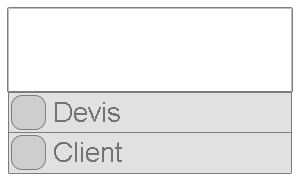
<style>
.page{position:relative;width:300px;height:179px;background:#ffffff}
.page>*{position:absolute;margin:0}
.t1{font:27px "ArialMT";color:#747474}
</style>
<div class="page">
<p class="t1" style="left:55px;top:102px;width:65px;height:20px">Devis</p>
<p class="t1" style="left:54px;top:142px;width:68px;height:20px">Client</p>
</div>
